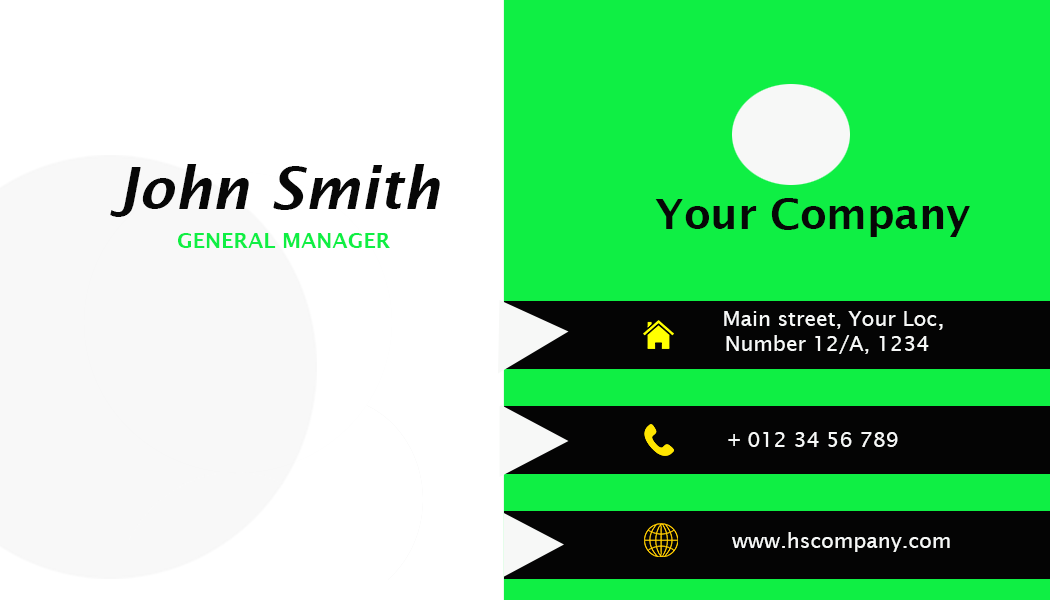
<style>
.page{position:relative;width:1050px;height:600px;background:#0fef44}
.page>*{position:absolute;margin:0}
.t1{font:58.3px "LucidaSans-DemiItalic";color:#070707}
.t2{font:41.7px "LucidaSans-Demi";color:#070707}
.t3{font:20.8px "LucidaSans-Demi";color:#0fef44}
.t4{font:20.8px "LucidaSans";color:#f6f8f7}
.t5{font:25px "LucidaSans";color:#f6f8f7}
</style>
<div class="page">
<p class="t1" style="left:110px;top:164px;width:330px;height:53px">John Smith</p>
<p class="t2" style="left:655px;top:198px;width:315px;height:39px">Your Company</p>
<p class="t3" style="left:178px;top:233px;width:212px;height:15px">GENERAL MANAGER</p>
<p class="t4" style="left:724px;top:311px;width:219px;height:19px">Main street, Your Loc<span class="t5">,</span></p>
<p class="t4" style="left:726px;top:335px;width:203px;height:19px">Number 12/A, 1234</p>
<p class="t4" style="left:728px;top:432px;width:170px;height:15px">+ 012 34 56 789</p>
<p class="t4" style="left:732px;top:532px;width:218px;height:20px">www.hscompany.com</p>
</div>
